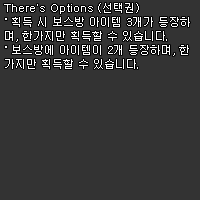
<style>
.page{position:relative;width:200px;height:200px;background:#333333}
.page>*{position:absolute;margin:0}
.t1{font:11px/14px "Dotum";color:#ffffff}
</style>
<div class="page">
<p class="t1" style="left:4px;top:3px;width:186px;height:66px">There's Options (선택권)<br>˚ 획득 시 보스방 아이템 3개가 등장하<br>며, 한가지만 획득할 수 있습니다.<br>˚ 보스방에 아이템이 2개 등장하며, 한<br>가지만 획득할 수 있습니다.</p>
</div>
